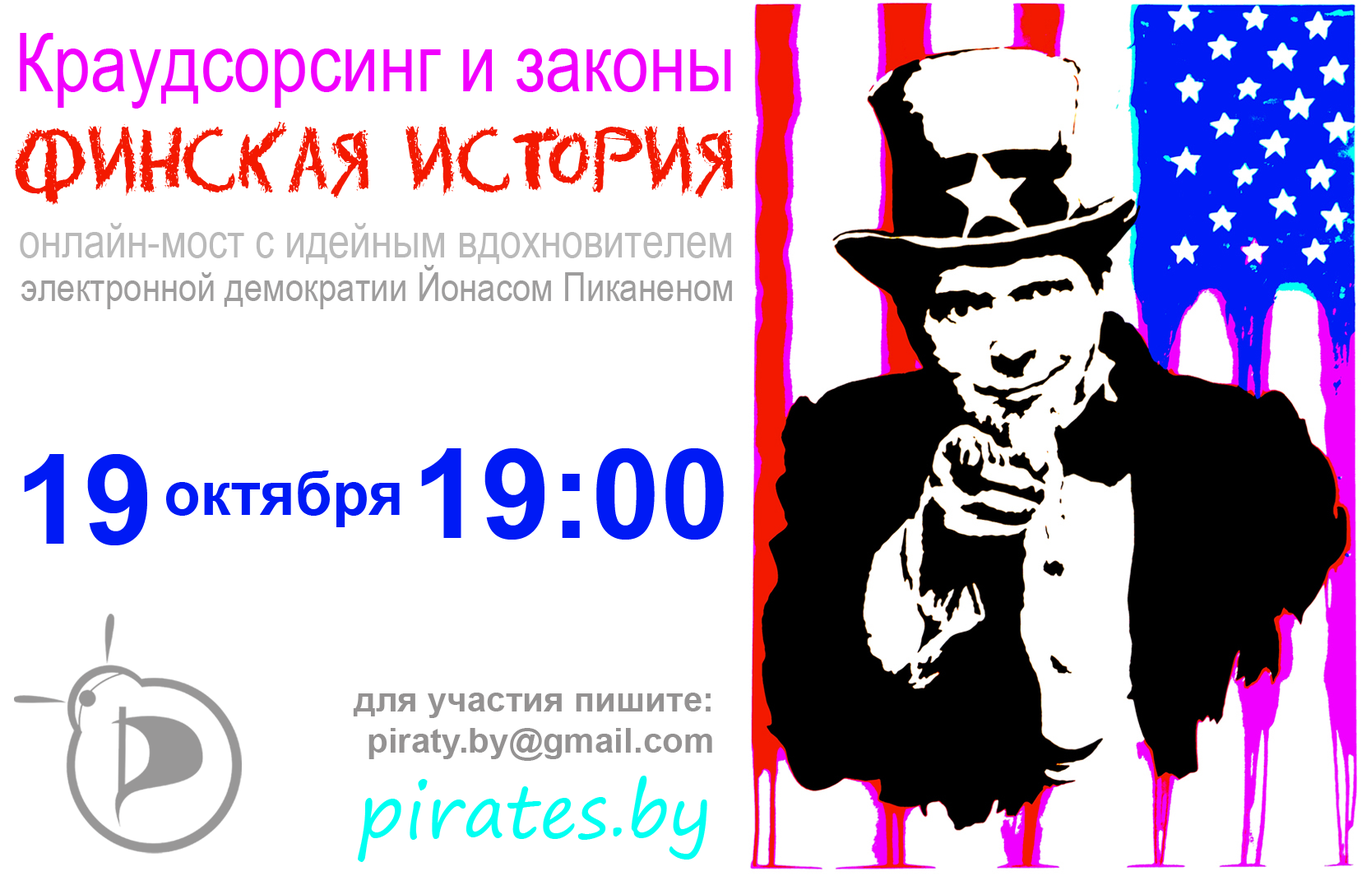
<style>
.page{position:relative;width:1362px;height:876px;background:#ffffff}
.page>*{position:absolute;margin:0}
.t1{font:81.5px "ArialNarrow";color:#f100fd}
.t2{font:81.4px "DSEraserCyr";color:#f31900;scale:0.83 1}
.t3{font:46.6px "ArialNarrow";color:#bababa}
.t4{font:40.4px "ArialNarrow";color:#9e9d9d}
.t5{font:123.9px "Arial-BoldMT";color:#001af5}
.t6{font:60.1px "Arial-BoldMT";color:#001af5}
.t7{font:34.7px "Arial-BoldMT";color:#949292}
.t8{font:72.6px "SegoePrint";color:#00fff2}
</style>
<div class="page">
<p class="t1" style="left:20px;top:33px;width:711px;height:76px">Краудсорсинг и законы</p>
<p class="t2" style="left:15px;top:122px;width:719px;height:83px">финская история</p>
<p class="t3" style="left:20px;top:223px;width:711px;height:41px">онлайн-мост с идейным вдохновителем</p>
<p class="t4" style="left:21px;top:265px;width:711px;height:44px">электронной демократии Йонасом Пиканеном</p>
<p class="t5" style="left:421px;top:448px;width:303px;height:91px">19:00</p>
<p class="t5" style="left:24px;top:454px;width:123px;height:91px">19</p>
<p class="t6" style="left:166px;top:470px;width:234px;height:57px">октября</p>
<p class="t7" style="left:353px;top:692px;width:359px;height:69px;text-align:right">для участия пишите:<br>piraty.by@gmail.com</p>
<p class="t8" style="left:358px;top:775px;width:349px;height:87px">pirates.by</p>
</div>
